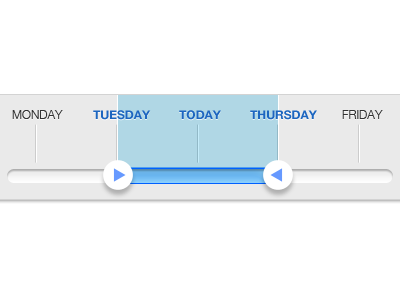
<style>
.page{position:relative;width:400px;height:300px;background:#ffffff}
.page>*{position:absolute;margin:0}
.t1{font:12px "HelveticaNeue-Light";color:#333333;text-transform:uppercase}
.t2{font:12px "HelveticaNeue-Bold";color:#1d66c0;text-transform:uppercase}
</style>
<div class="page">
<p class="t1" style="left:12px;top:110px;width:51px;height:9px">Monday</p>
<p class="t2" style="left:93px;top:110px;width:58px;height:10px">Tuesday</p>
<p class="t2" style="left:179px;top:110px;width:42px;height:10px">Today</p>
<p class="t2" style="left:250px;top:110px;width:67px;height:10px">Thursday</p>
<p class="t1" style="left:342px;top:110px;width:41px;height:9px">Friday</p>
</div>
